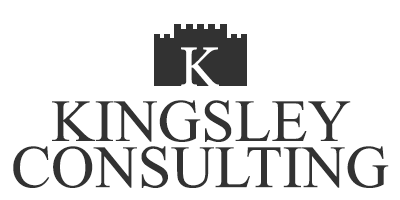
<style>
.page{position:relative;width:400px;height:200px;background:#ffffff}
.page>*{position:absolute;margin:0}
.t1{font:60px "MinionPro-Regular";color:#ffffff}
.t2{font:60px/46px "TimesNewRomanPSMT";color:#323232}
</style>
<div class="page">
<p class="t1" style="left:181px;top:47px;width:38px;height:40px">K</p>
<p class="t2" style="left:13px;top:100px;width:376px;height:88px;text-align:center">KINGSLEY <br>CONSULTING</p>
</div>
